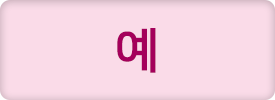
<style>
.page{position:relative;width:275px;height:100px;background:#fadbe8}
.page>*{position:absolute;margin:0}
.t1{font:48px "NanumSquareB";color:#a4005b;font-weight:bold}
</style>
<div class="page">
<p class="t1" style="left:117px;top:28px;width:39px;height:45px">예</p>
</div>
